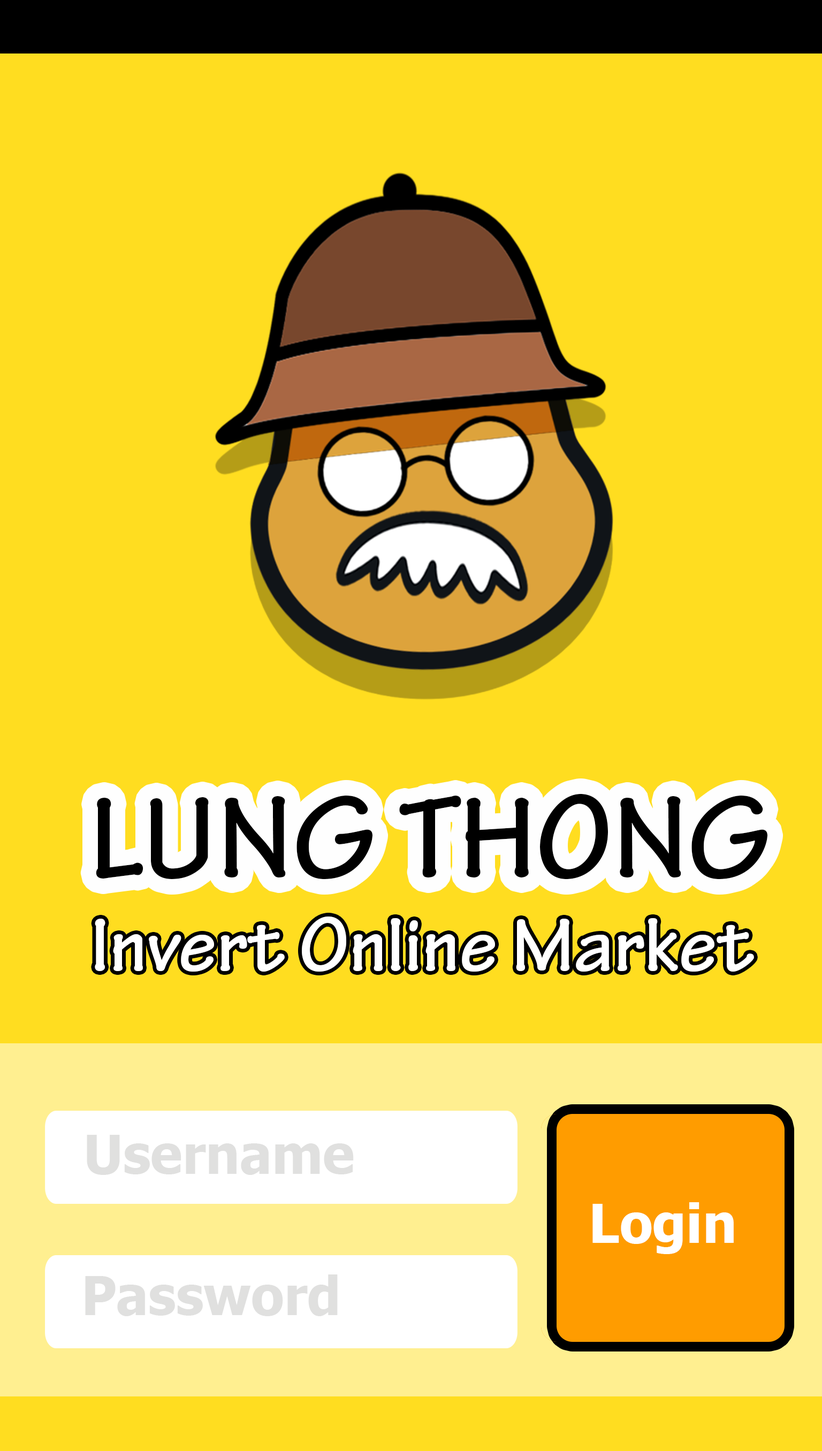
<style>
.page{position:relative;width:822px;height:1451px;background:#ffdd20}
.page>*{position:absolute;margin:0}
.t1{font:123.1px "TektonPro-Bold";color:#000000}
.t2{font:80.3px "TektonPro-Bold";color:#ffffff}
.t3{font:53.5px "Tahoma-Bold";color:#e0e0df}
.t4{font:53.5px "Tahoma-Bold";color:#ffffff}
</style>
<div class="page">
<p class="t1" style="left:96px;top:793px;width:671px;height:87px">LUNG THONG</p>
<p class="t2" style="left:95px;top:917px;width:659px;height:55px">Invert Online Market</p>
<p class="t3" style="left:87px;top:1135px;width:267px;height:40px">Username</p>
<p class="t4" style="left:592px;top:1202px;width:142px;height:52px">Login</p>
<p class="t3" style="left:85px;top:1274px;width:253px;height:42px">Password</p>
</div>
